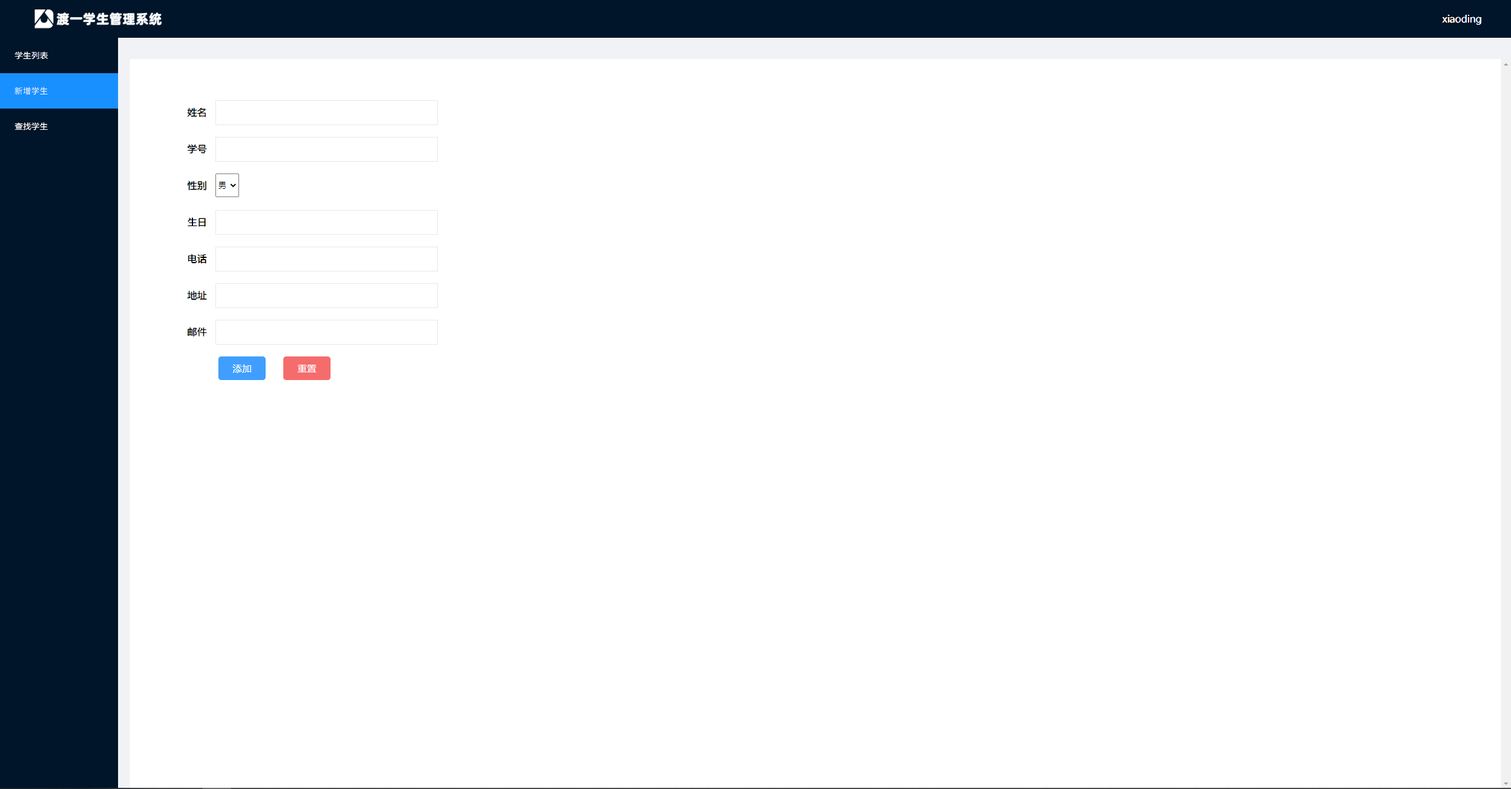
<style>
.page{position:relative;width:1511px;height:789px;background:#ffffff}
.page>*{position:absolute;margin:0}
.t1{font:10.9px "DengXian";color:#ffffff}
.t2{font:8px "NotoSansCJKsc-DemiLight";letter-spacing:0.07em;color:#ffffff;text-transform:uppercase}
.t3{font:8.2px "NotoSansCJKsc-DemiLight";letter-spacing:0.03em;color:#ffffff;text-transform:uppercase}
.t4{font:10.2px "NotoSansCJKsc-DemiLight";color:#000000;text-transform:uppercase}
.t5{font:10px "NotoSansCJKsc-DemiLight";color:#000000;text-transform:uppercase}
</style>
<div class="page">
<p class="t1" style="left:1442px;top:15px;width:40px;height:10px">xiaoding</p>
<p class="t2" style="left:15px;top:51px;width:33px;height:8px">学生列表</p>
<p class="t3" style="left:15px;top:87px;width:33px;height:8px">新增学生</p>
<p class="t4" style="left:187px;top:107px;width:19px;height:10px">姓名</p>
<p class="t3" style="left:15px;top:122px;width:33px;height:8px">查找学生</p>
<p class="t4" style="left:187px;top:144px;width:20px;height:10px">学号</p>
<p class="t4" style="left:187px;top:181px;width:20px;height:10px">性别</p>
<p class="t5" style="left:188px;top:217px;width:18px;height:10px">生日</p>
<p class="t4" style="left:188px;top:254px;width:19px;height:10px">电话</p>
<p class="t4" style="left:187px;top:290px;width:20px;height:10px">地址</p>
<p class="t4" style="left:188px;top:327px;width:19px;height:10px">邮件</p>
</div>
